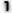
<style>
.page{position:relative;width:12px;height:13px}
.page>*{position:absolute;margin:0}
.t1{font:13.9px "K2D-ExtraBold";color:#000000}
</style>
<div class="page">
<p class="t1" style="left:4px;top:1px;width:5px;height:10px">1</p>
</div>
